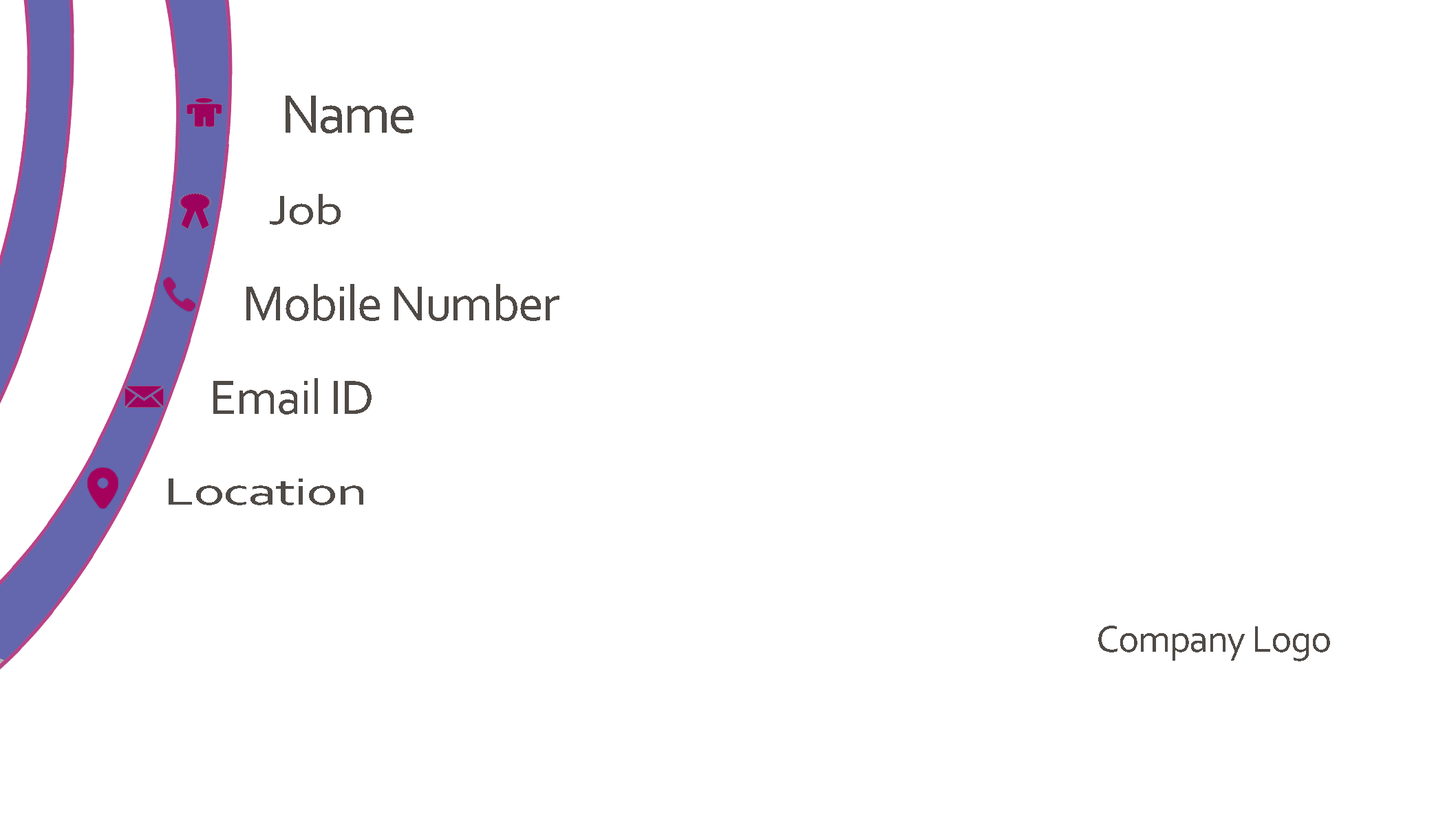
<style>
.page{position:relative;width:1445px;height:825px;background:#ffffff}
.page>*{position:absolute;margin:0}
.t1{font:56.8px "Corbel";letter-spacing:-0.025em;color:#4f4a46}
.t2{font:42.6px "Corbel";letter-spacing:-0.025em;color:#4f4a46;scale:1.26 1}
.t3{font:51.6px "Corbel";letter-spacing:-0.025em;color:#4f4a46}
.t4{font:50.3px "Corbel";letter-spacing:-0.025em;color:#4f4a46}
.t5{font:40.1px "Corbel";letter-spacing:-0.025em;color:#4f4a46;scale:1.47 1}
.t6{font:39.4px "Corbel";letter-spacing:-0.025em;color:#4f4a46}
</style>
<div class="page">
<p class="t1" style="left:285px;top:96px;width:128px;height:37px">Name</p>
<p class="t2" style="left:270px;top:194px;width:71px;height:31px">Job</p>
<p class="t3" style="left:246px;top:284px;width:313px;height:37px">Mobile Number</p>
<p class="t4" style="left:213px;top:378px;width:158px;height:37px">Email ID</p>
<p class="t5" style="left:169px;top:479px;width:194px;height:27px">Location</p>
<p class="t6" style="left:1098px;top:626px;width:232px;height:36px">Company Logo</p>
</div>
